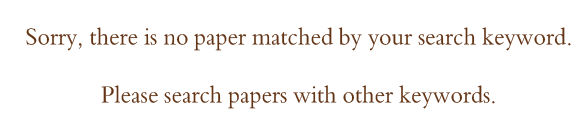
<style>
.page{position:relative;width:588px;height:125px;background:#ffffff}
.page>*{position:absolute;margin:0}
.t1{font:25.2px "TraditionalArabic";color:#623314;scale:0.95 1}
</style>
<div class="page">
<p class="t1" style="left:26px;top:27px;width:545px;height:82px;text-align:center">Sorry, there is no paper matched by your search keyword.<br><br>Please search papers with other keywords.</p>
</div>
